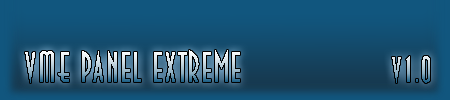
<style>
.page{position:relative;width:450px;height:100px}
.page>*{position:absolute;margin:0}
.t1{font:43.2px "DecoTechTL";letter-spacing:0.05em;scale:0.83 1}
.t2{font:36px "DecoTechTL";letter-spacing:0.05em;scale:0.83 1}
</style>
<div class="page">
<p class="t1" style="left:25px;top:50px;width:405px;height:33px">VME Panel extreme                 <span class="t2">V1.0</span></p>
</div>
